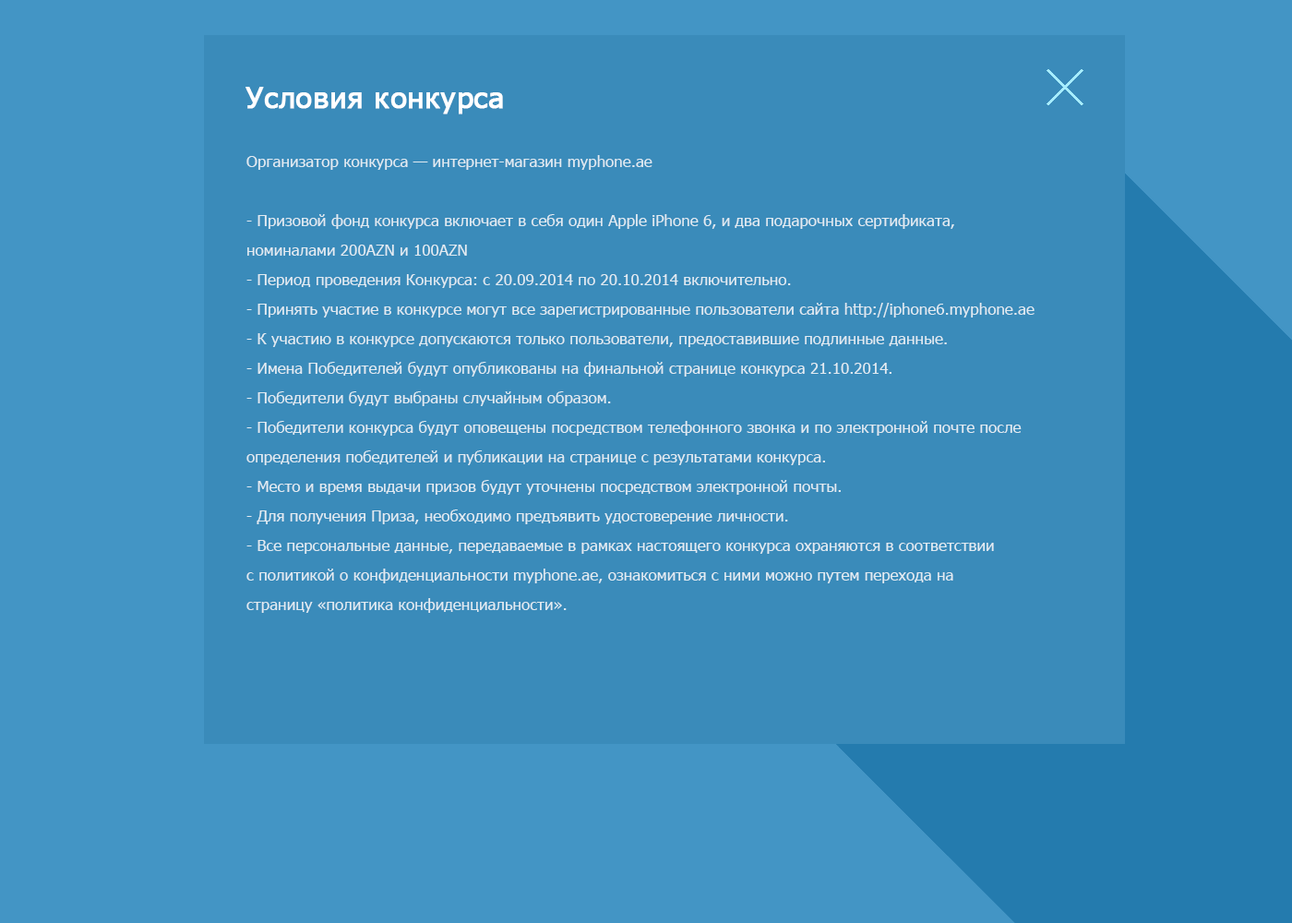
<style>
.page{position:relative;width:1292px;height:923px;background:#3a8bba}
.page>*{position:absolute;margin:0}
.t1{font:29.5px "Tahoma";letter-spacing:0.01em;color:#ffffff;font-weight:bold}
.t2{font:15.7px/29.5px "Tahoma";color:#e1ebf2}
</style>
<div class="page">
<p class="t1" style="left:245px;top:87px;width:258px;height:27px">Условия конкурса</p>
<p class="t2" style="left:246px;top:155px;width:789px;height:458px">Организатор конкурса — интернет-магазин myphone.ae<br><br>- Призовой фонд конкурса включает в себя один Apple iPhone 6, и два подарочных сертификата, <br>номиналами 200AZN и 100AZN<br>- Период проведения Конкурса: c 20.09.2014 по 20.10.2014 включительно.<br>- Принять участие в конкурсе могут все зарегистрированные пользователи сайта http://iphone6.myphone.ae<br>- К участию в конкурсе допускаются только пользователи, предоставившие подлинные данные.<br>- Имена Победителей будут опубликованы на финальной странице конкурса 21.10.2014.<br>- Победители будут выбраны случайным образом.<br>- Победители конкурса будут оповещены посредством телефонного звонка и по электронной почте после <br>определения победителей и публикации на странице с результатами конкурса.<br>- Место и время выдачи призов будут уточнены посредством электронной почты.<br>- Для получения Приза, необходимо предъявить удостоверение личности.<br>- Все персональные данные, передаваемые в рамках настоящего конкурса охраняются в соответствии <br>с политикой о конфиденциальности myphone.ae, ознакомиться с ними можно путем перехода на <br>страницу «политика конфиденциальности».</p>
</div>
